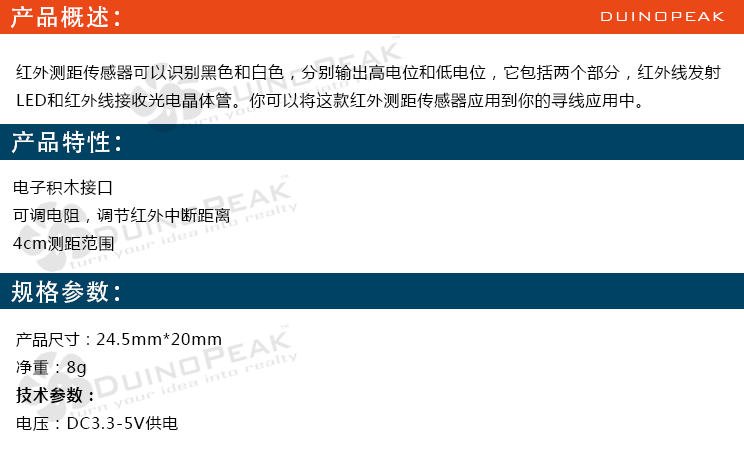
<style>
.page{position:relative;width:744px;height:454px;background:#ffffff}
.page>*{position:absolute;margin:0}
.t1{font:24px "AdobeHeitiStd-Regular";letter-spacing:0.05em;color:#ffffff}
.t2{font:18px "BankGothicBT-Light";letter-spacing:0.05em;color:#ffffff}
.t3{font:16px "MicrosoftYaHei";letter-spacing:0.05em;color:#000000}
.t4{font:16px "MicrosoftYaHei";color:#000000}
.t5{font:16px "MicrosoftYaHei-Bold";letter-spacing:0.05em;color:#000000}
</style>
<div class="page">
<p class="t1" style="left:10px;top:6px;width:109px;height:23px">产品概述：</p>
<p class="t2" style="left:601px;top:12px;width:124px;height:9px">DUINOPEAK</p>
<p class="t3" style="left:16px;top:64px;width:705px;height:45px">红外测距传感器可以识别黑色和白色，分别输出高电位和低电位，它包括两个部分，红外线发射<br>LED和红外线接收光电晶体管。你可以将这款红外测距传感器应用到你的寻线应用中。</p>
<p class="t1" style="left:11px;top:130px;width:109px;height:24px">产品特性：</p>
<p class="t3" style="left:13px;top:179px;width:217px;height:73px">电子积木接口<br>可调电阻，调节红外中断距离<br>4cm测距范围</p>
<p class="t1" style="left:11px;top:280px;width:108px;height:23px">规格参数：</p>
<p class="t3" style="left:16px;top:332px;width:205px;height:99px"><span class="t4">产品尺寸：</span>24.5mm*20mm<br>净重：8g<br><span class="t5">技术参数：<br></span>电压：DC3.3-5V供电</p>
</div>
